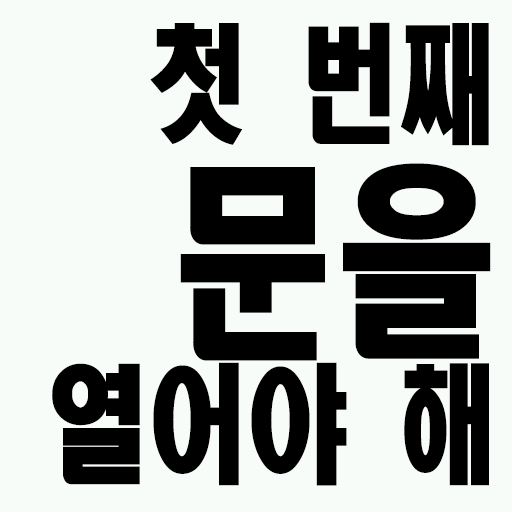
<style>
.page{position:relative;width:512px;height:512px;background:#f8fcf8}
.page>*{position:absolute;margin:0}
.t1{font:127.3px/170px "HeadlineR-HM";color:#000000;scale:0.79 1}
.t2{font:207.1px/170px "HeadlineR-HM";color:#000000;scale:0.79 1}
</style>
<div class="page">
<p class="t1" style="left:52px;top:22px;width:439px;height:464px;text-align:right">첫 번째 <span class="t2">문을<br></span>열어야 해</p>
</div>
